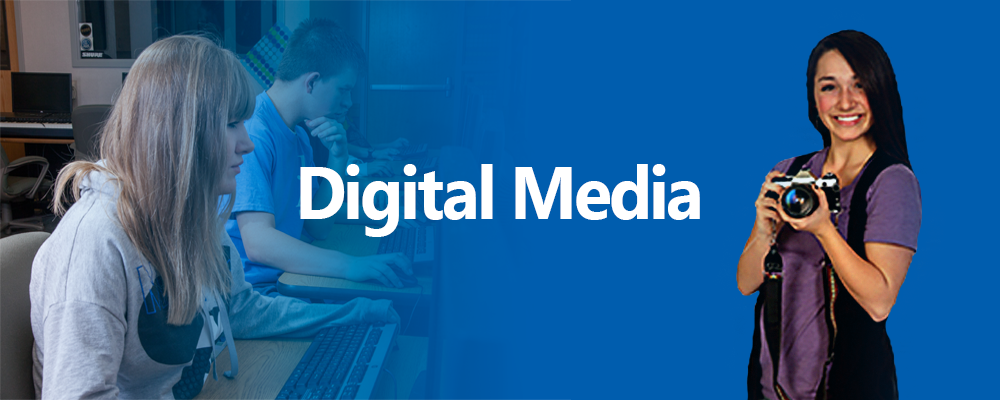
<style>
.page{position:relative;width:1000px;height:400px;background:#005dae}
.page>*{position:absolute;margin:0}
.t1{font:73.9px "MyanmarText-Bold";letter-spacing:-0.04em;color:#ffffff;scale:0.94 1}
</style>
<div class="page">
<p class="t1" style="left:300px;top:164px;width:400px;height:73px">Digital Media</p>
</div>
